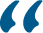
<style>
.page{position:relative;width:43px;height:33px;background:#ffffff}
.page>*{position:absolute;margin:0}
.t1{font:150px "AJensonPro-Regular";color:#005a8b}
</style>
<div class="page">
<p class="t1" style="left:0px;top:0px;width:43px;height:33px">“</p>
</div>
